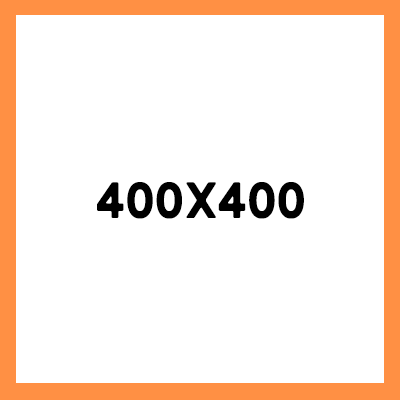
<style>
.page{position:relative;width:400px;height:400px;background:#ffffff}
.page>*{position:absolute;margin:0}
.t1{font:50px "MarketFreshBoldAllCaps";color:#000000}
</style>
<div class="page">
<p class="t1" style="left:97px;top:182px;width:207px;height:37px">400x400</p>
</div>
